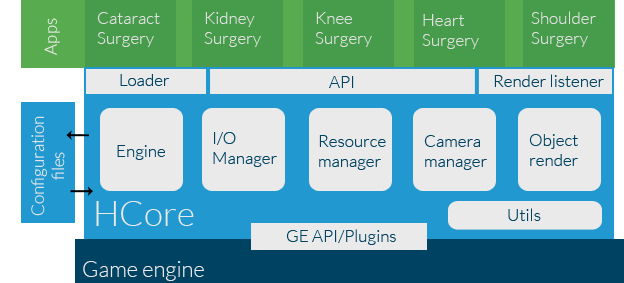
<style>
.page{position:relative;width:624px;height:283px;background:#ebeaea}
.page>*{position:absolute;margin:0}
.t1{font:17px "Lato-Light";color:#e0e0e0}
.t2{font:17px "Lato-Light";color:#ebebeb}
.t3{font:17px "Lato-Light";color:#004261}
.t4{font:17px "Lato-Light";color:#ebeaea}
.t5{font:35px "Lato-Light";color:#ebeaea}
.t6{font:22px "Lato-Light";color:#ebeaea}
</style>
<div class="page">
<p class="t1" style="left:97px;top:12px;width:63px;height:35px">Cataract<br>Surgery</p>
<p class="t1" style="left:204px;top:12px;width:57px;height:35px">Kidney<br>Surgery</p>
<p class="t1" style="left:315px;top:12px;width:57px;height:35px">Knee<br>Surgery</p>
<p class="t1" style="left:422px;top:14px;width:57px;height:35px">Heart<br>Surgery</p>
<p class="t1" style="left:531px;top:11px;width:65px;height:36px">Shoulder<br>Surgery</p>
<p class="t2" style="left:44px;top:18px;width:16px;height:37px;rotate:-90deg">Apps</p>
<p class="t3" style="left:120px;top:74px;width:50px;height:12px">Loader</p>
<p class="t3" style="left:329px;top:76px;width:25px;height:12px">API</p>
<p class="t3" style="left:494px;top:74px;width:110px;height:13px">Render listener</p>
<p class="t4" style="left:31px;top:116px;width:34px;height:100px;text-align:center;rotate:-90deg">Configuration<br>files</p>
<p class="t3" style="left:213px;top:132px;width:64px;height:35px">I/O<br>Manager</p>
<p class="t3" style="left:319px;top:135px;width:67px;height:35px">Resource<br>manager</p>
<p class="t3" style="left:424px;top:135px;width:63px;height:35px">Camera<br>manager</p>
<p class="t3" style="left:529px;top:134px;width:49px;height:32px">Object<br>render</p>
<p class="t3" style="left:117px;top:145px;width:48px;height:15px">Engine</p>
<p class="t5" style="left:96px;top:201px;width:98px;height:25px">HCore</p>
<p class="t3" style="left:508px;top:208px;width:33px;height:13px">Utils</p>
<p class="t3" style="left:286px;top:229px;width:110px;height:16px">GE API/Plugins</p>
<p class="t6" style="left:83px;top:261px;width:121px;height:20px">Game engine</p>
</div>
